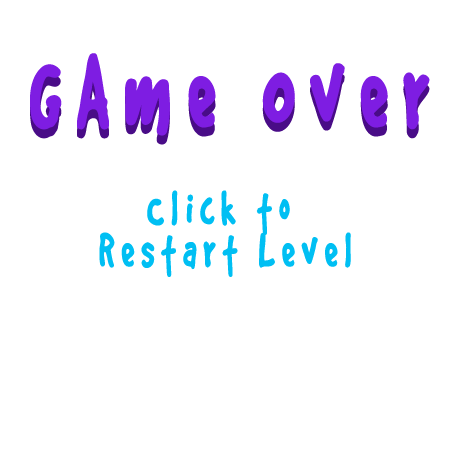
<style>
.page{position:relative;width:450px;height:450px;background:#ffffff}
.page>*{position:absolute;margin:0}
.t1{font:114.8px "GoodDogPlain";letter-spacing:0.2em;color:#7e1de2;font-weight:bold;scale:0.66 1}
.t2{font:114.8px "GoodDogPlain";letter-spacing:0.2em;font-weight:bold;scale:0.66 1}
.t3{font:52.9px "GoodDogPlain";letter-spacing:0.2em;color:#00bff3;font-weight:bold;scale:0.66 1}
</style>
<div class="page">
<p class="t1" style="left:30px;top:53px;width:400px;height:83px">GAme Over</p>
<p class="t2" style="left:30px;top:62px;width:400px;height:83px">GAme Over</p>
<p class="t3" style="left:99px;top:190px;width:252px;height:87px;text-align:center">Click to <br>Restart Level</p>
</div>
